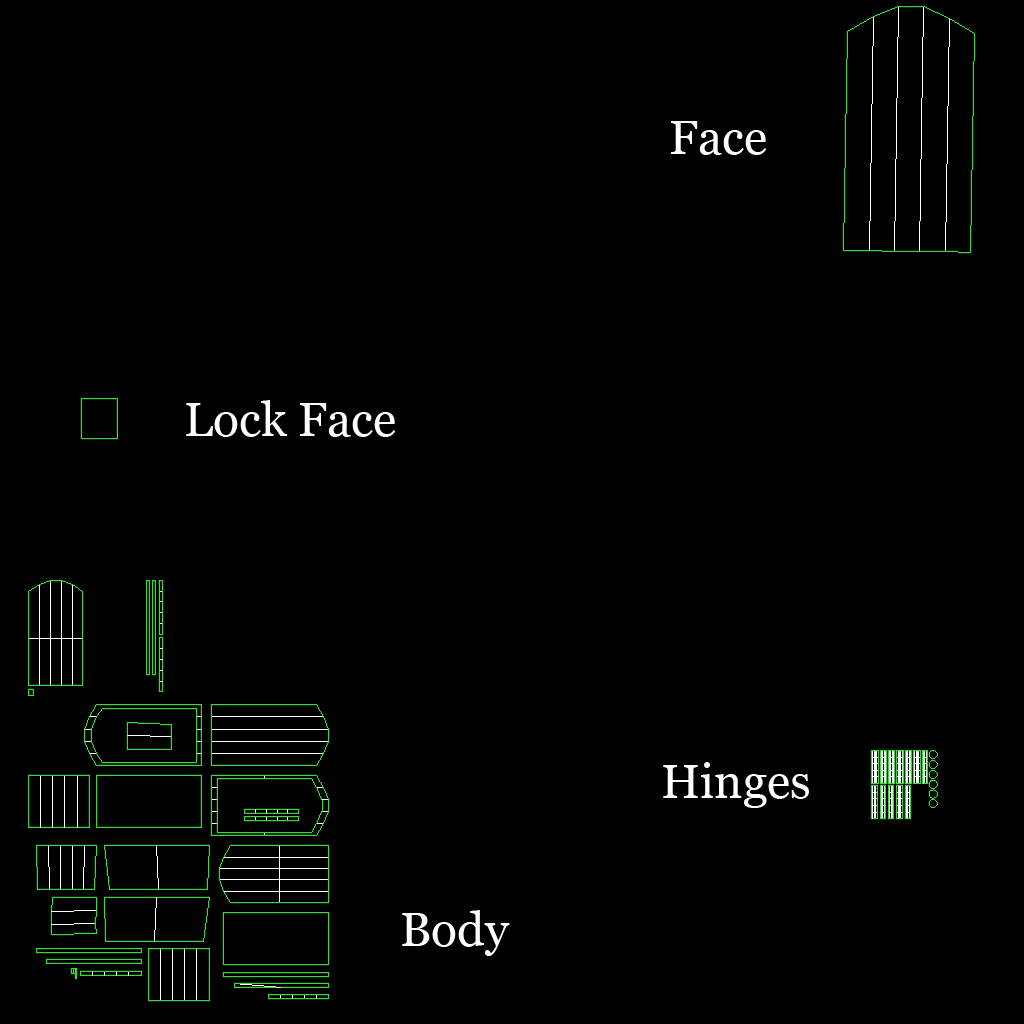
<style>
.page{position:relative;width:1024px;height:1024px;background:#000000}
.page>*{position:absolute;margin:0}
.t1{font:48px "Georgia";color:#ffffff}
</style>
<div class="page">
<p class="t1" style="left:671px;top:121px;width:96px;height:34px">Face</p>
<p class="t1" style="left:186px;top:400px;width:210px;height:37px">Lock Face</p>
<p class="t1" style="left:663px;top:762px;width:146px;height:46px">Hinges</p>
<p class="t1" style="left:402px;top:910px;width:108px;height:46px">Body</p>
</div>
